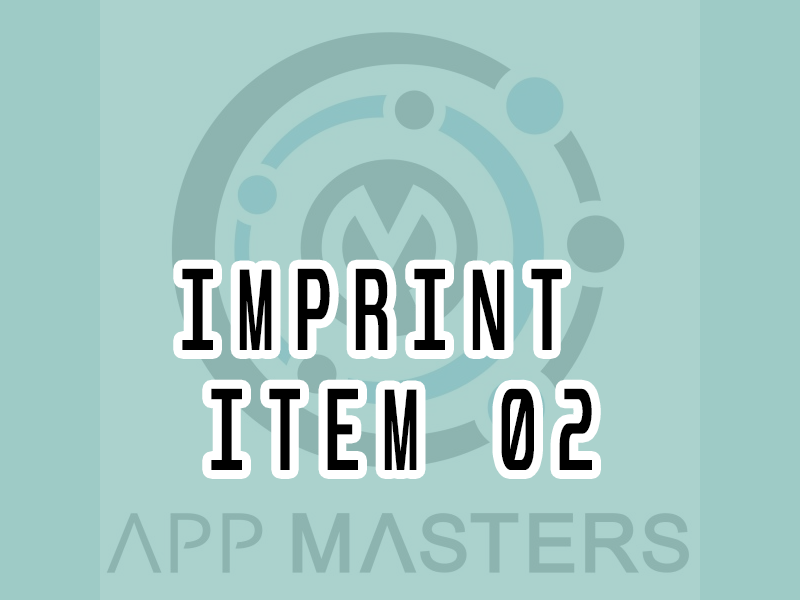
<style>
.page{position:relative;width:800px;height:600px;background:#abd2cd}
.page>*{position:absolute;margin:0}
.t1{font:100.3px/120px "Unispace-Bold";letter-spacing:0.34em;color:#000000;text-transform:uppercase;scale:0.61 1}
</style>
<div class="page">
<p class="t1" style="left:182px;top:268px;width:410px;height:202px;text-align:center">Imprint <br>Item 02</p>
</div>
